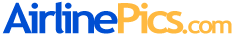
<style>
.page{position:relative;width:238px;height:40px;background:#ffffff}
.page>*{position:absolute;margin:0}
.t1{font:42px "TrebuchetMS-Bold";letter-spacing:-0.1em;color:#004fd2;scale:1.1 1}
.t2{font:42px "TrebuchetMS-Bold";letter-spacing:-0.1em;color:#ffb940;scale:1.1 1}
.t3{font:24px "TrebuchetMS-Bold";letter-spacing:-0.1em;color:#ffb940;scale:1.1 1}
</style>
<div class="page">
<p class="t1" style="left:2px;top:1px;width:230px;height:33px">Airline<span class="t2">Pics</span><span class="t3">.com</span></p>
</div>
